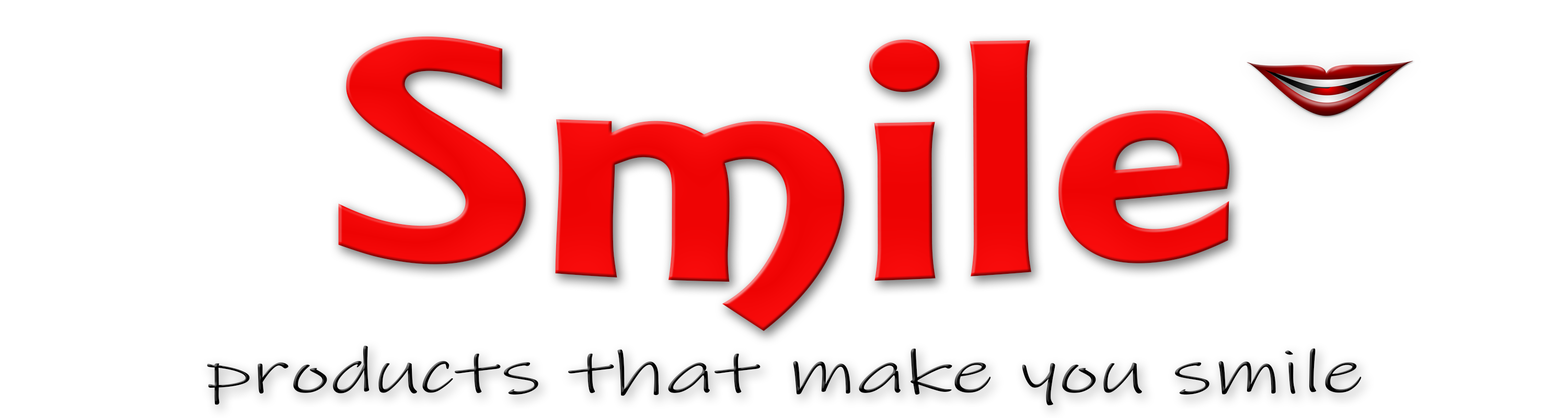
<style>
.page{position:relative;width:1568px;height:418px;background:#ffffff}
.page>*{position:absolute;margin:0}
.t1{font:326.3px "ARESSENCE";color:#f10606;scale:1.5 1}
.t2{font:61.7px "InkFree";color:#000000;scale:1.5 1}
</style>
<div class="page">
<p class="t1" style="left:338px;top:36px;width:892px;height:295px">Smile</p>
<p class="t2" style="left:207px;top:345px;width:1155px;height:61px">products that make you smile</p>
</div>
